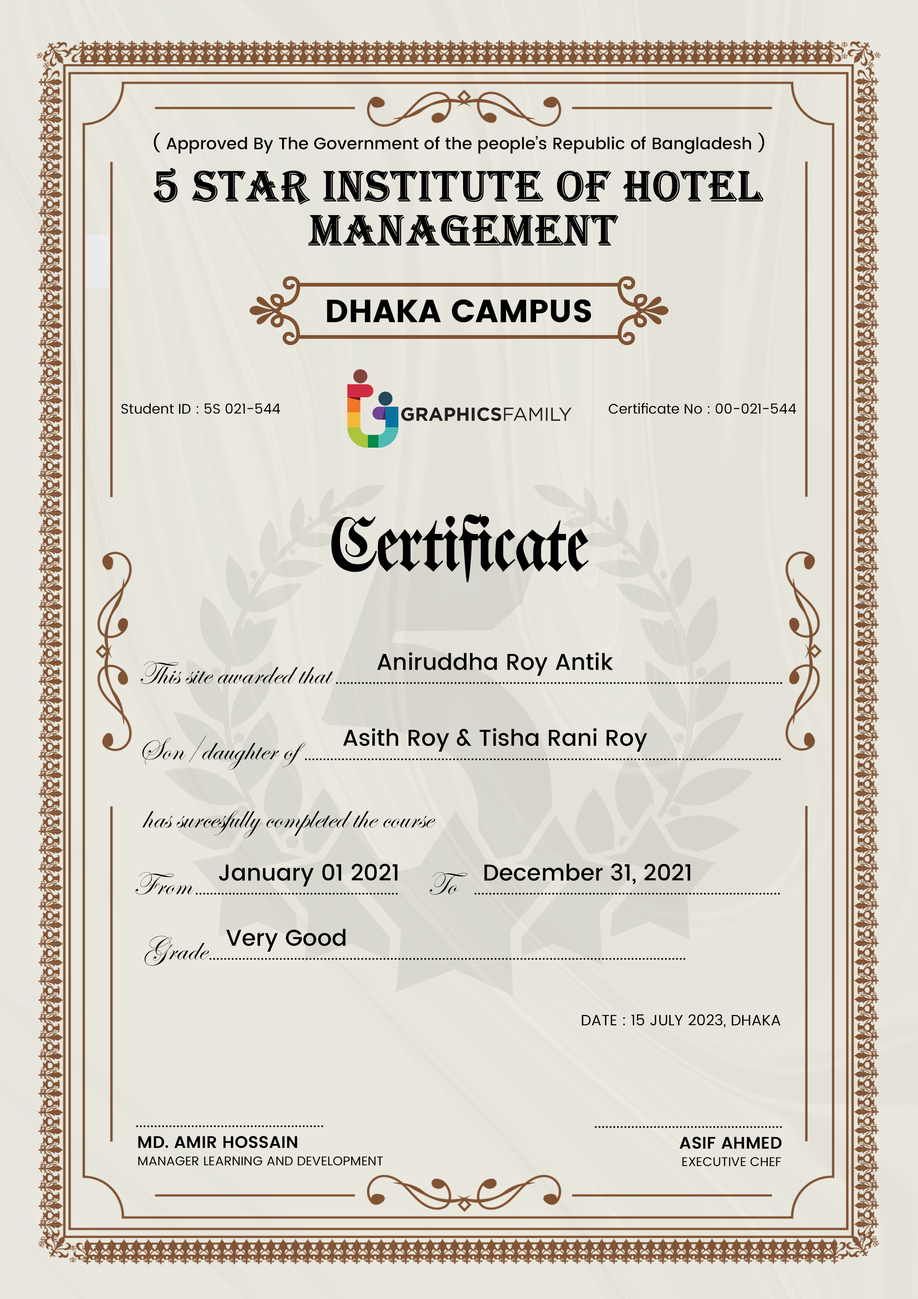
<style>
.page{position:relative;width:918px;height:1299px}
.page>*{position:absolute;margin:0}
.t1{font:16.7px "Poppins-Medium";color:#000000}
.t2{font:44.6px/44.3px "Algerian";color:#000000;text-transform:uppercase;font-weight:bold}
.t3{font:32px "Poppins-Bold";color:#000000;text-transform:uppercase}
.t4{font:13.9px "Poppins-Regular";color:#000000}
.t5{font:69.1px "Walbaum-Fraktur";color:#000000}
.t6{font:22.9px "Poppins-Medium";color:#000000}
.t7{font:32.6px "EdwardianScriptITC";color:#000000}
.t8{font:22.8px "Poppins-Medium";color:#000000}
.t9{font:15px "Poppins-Regular";color:#000000;text-transform:uppercase}
.t10{font:16.8px "Poppins-SemiBold";color:#000000;text-transform:uppercase}
.t11{font:12.7px "Poppins-Regular";color:#000000;text-transform:uppercase}
</style>
<div class="page">
<p class="t1" style="left:154px;top:133px;width:611px;height:21px">( Approved By The Government of the people’s Republic of Bangladesh )</p>
<p class="t2" style="left:154px;top:168px;width:610px;height:77px;text-align:center">5 STAR INSTITUTE OF HOTEL <br>MANAGEMENT</p>
<p class="t3" style="left:327px;top:299px;width:264px;height:23px">Dhaka Campus</p>
<p class="t4" style="left:121px;top:403px;width:159px;height:11px">Student ID : 5S 021-544</p>
<p class="t4" style="left:609px;top:403px;width:187px;height:11px">Certificate No : 00-021-544</p>
<p class="t5" style="left:331px;top:514px;width:258px;height:68px">Certificate</p>
<p class="t6" style="left:377px;top:652px;width:236px;height:24px">Aniruddha Roy Antik</p>
<p class="t7" style="left:140px;top:661px;width:194px;height:23px">This site awarded that</p>
<p class="t7" style="left:142px;top:735px;width:164px;height:35px">Son/daughter of</p>
<p class="t6" style="left:343px;top:728px;width:305px;height:24px">Asith Roy &amp; Tisha Rani Roy</p>
<p class="t7" style="left:142px;top:810px;width:294px;height:28px">has surcesfully completed the course</p>
<p class="t6" style="left:219px;top:863px;width:179px;height:23px">January 01 2021</p>
<p class="t6" style="left:484px;top:863px;width:206px;height:21px">December 31, 2021</p>
<p class="t7" style="left:136px;top:872px;width:59px;height:22px">From</p>
<p class="t7" style="left:429px;top:872px;width:39px;height:22px">To</p>
<p class="t8" style="left:226px;top:929px;width:120px;height:22px">Very Good</p>
<p class="t7" style="left:144px;top:936px;width:66px;height:30px">Grade</p>
<p class="t9" style="left:582px;top:1014px;width:199px;height:13px">Date : 15 July 2023, Dhaka</p>
<p class="t10" style="left:138px;top:1135px;width:159px;height:13px">Md. Amir Hossain</p>
<p class="t10" style="left:680px;top:1136px;width:102px;height:13px">Asif ahmed</p>
<p class="t11" style="left:138px;top:1156px;width:245px;height:9px">manager learning and development</p>
<p class="t11" style="left:682px;top:1157px;width:99px;height:9px">executive chef</p>
</div>
